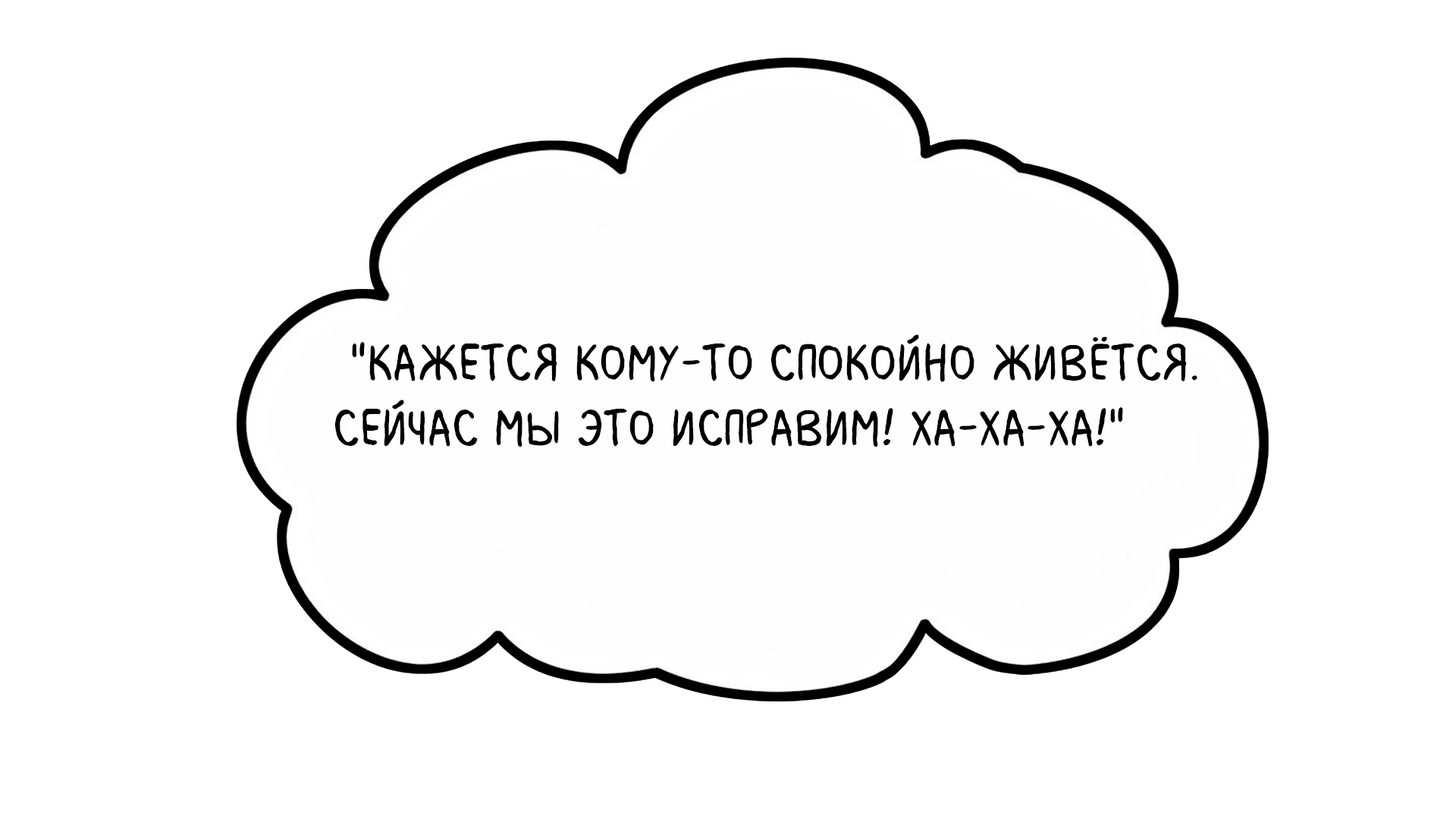
<style>
.page{position:relative;width:1456px;height:819px;background:#ffffff}
.page>*{position:absolute;margin:0}
.t1{font:54.6px "MilkMustacheBB";color:#000000}
</style>
<div class="page">
<p class="t1" style="left:334px;top:334px;width:863px;height:113px">"Кажется кому-то спокойно живётся. <br>Сейчас мы это исправим! Ха-ха-ха!"</p>
</div>
